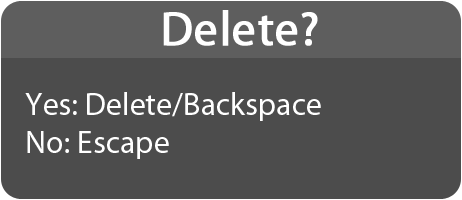
<style>
.page{position:relative;width:462px;height:200px;background:#4c4c4c}
.page>*{position:absolute;margin:0}
.t1{font:48px "MyriadPro-Regular";color:#ffffff;font-weight:bold}
.t2{font:32px "MyriadPro-Regular";color:#ffffff}
</style>
<div class="page">
<p class="t1" style="left:163px;top:10px;width:155px;height:36px">Delete?</p>
<p class="t2" style="left:25px;top:92px;width:296px;height:67px">Yes: Delete/Backspace<br>No: Escape</p>
</div>
